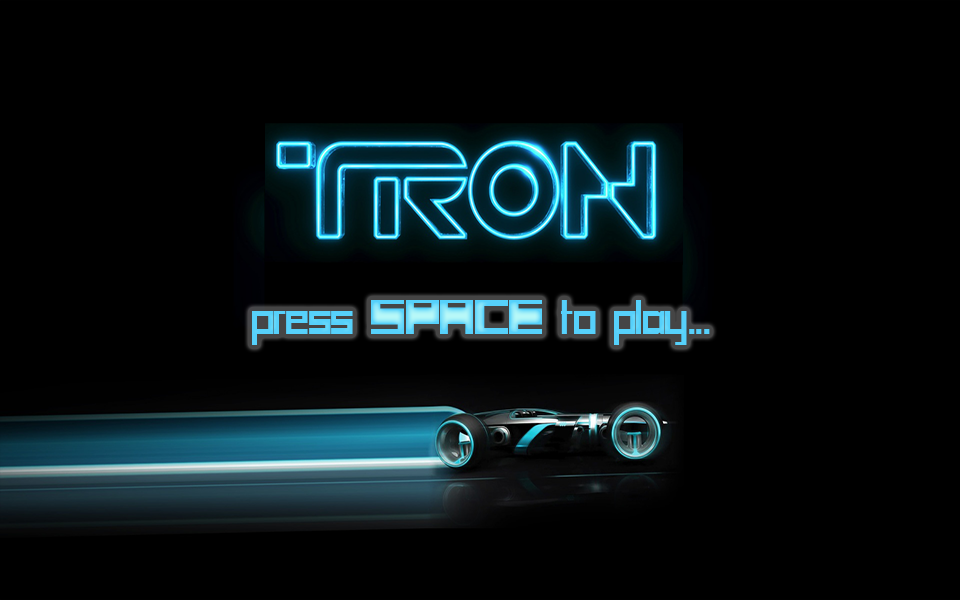
<style>
.page{position:relative;width:960px;height:600px;background:#000000}
.page>*{position:absolute;margin:0}
.t1{font:40px "SCIFIBOX";color:#56d1fb;scale:0.9 1}
</style>
<div class="page">
<p class="t1" style="left:252px;top:300px;width:458px;height:45px">press SPACE to play...</p>
</div>
